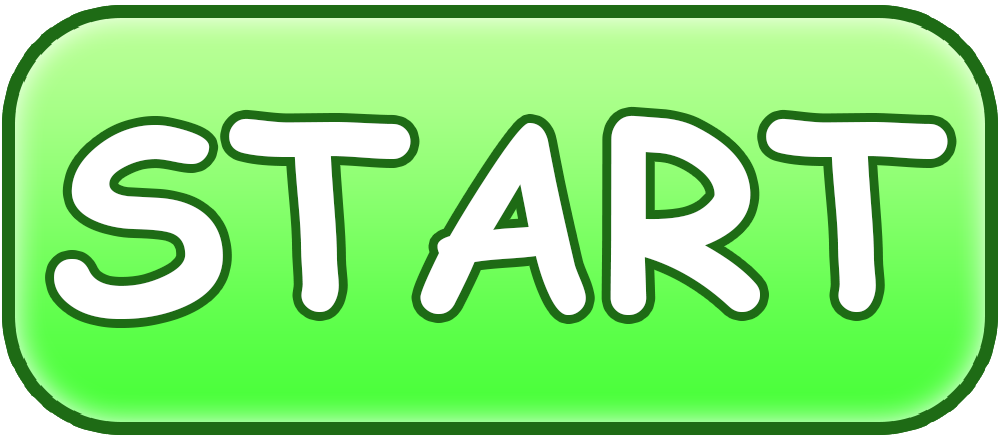
<style>
.page{position:relative;width:1000px;height:438px;background:#ffffff}
.page>*{position:absolute;margin:0}
.t1{font:259.8px "ComicSansMS-Bold";color:#ffffff}
</style>
<div class="page">
<p class="t1" style="left:54px;top:115px;width:894px;height:204px">START</p>
</div>
